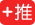
<style>
.page{position:relative;width:35px;height:25px;background:#f22525}
.page>*{position:absolute;margin:0}
.t1{font:24px "DFYuan-Bd-HK-BF";color:#ffffff}
.t2{font:18px "DFYuan-Bd-HK-BF";color:#ffffff}
</style>
<div class="page">
<p class="t1" style="left:2px;top:6px;width:11px;height:11px">+</p>
<p class="t2" style="left:15px;top:3px;width:17px;height:18px">推</p>
</div>
